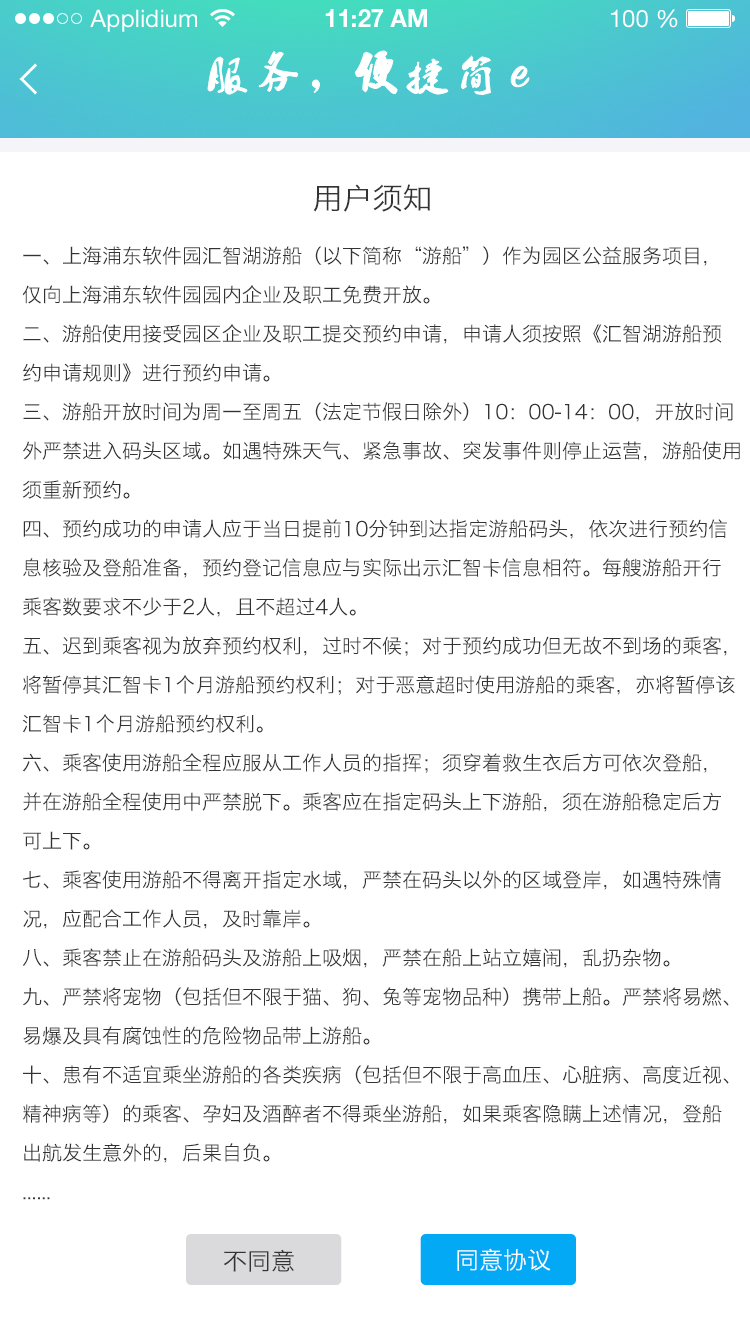
<style>
.page{position:relative;width:750px;height:1334px;background:#ffffff}
.page>*{position:absolute;margin:0}
.t1{font:24px "HelveticaNeueLTStd-Roman";color:#ffffff}
.t2{font:24px "HelveticaNeueLTStd-Bd";color:#ffffff}
.t3{font:30px "HiraginoSansGB-W3";color:#333333;text-transform:uppercase}
.t4{font:20px/39px "HiraginoSansGB-W3";color:#333333;text-transform:uppercase}
.t5{font:24px "HiraginoSansGB-W3";color:#333333;text-transform:uppercase}
.t6{font:24px "HiraginoSansGB-W3";color:#ffffff;text-transform:uppercase}
</style>
<div class="page">
<p class="t1" style="left:90px;top:9px;width:107px;height:23px">Applidium</p>
<p class="t2" style="left:325px;top:9px;width:102px;height:18px">11:27 AM</p>
<p class="t1" style="left:611px;top:9px;width:67px;height:19px">100 %</p>
<p class="t3" style="left:313px;top:184px;width:117px;height:28px">用户须知</p>
<p class="t4" style="left:22px;top:246px;width:718px;height:954px">一、上海浦东软件园汇智湖游船（以下简称“游船”）作为园区公益服务项目，<br>仅向上海浦东软件园园内企业及职工免费开放。<br>二、游船使用接受园区企业及职工提交预约申请，申请人须按照《汇智湖游船预<br>约申请规则》进行预约申请。<br>三、游船开放时间为周一至周五（法定节假日除外）10：00-14：00，开放时间<br>外严禁进入码头区域。如遇特殊天气、紧急事故、突发事件则停止运营，游船使用<br>须重新预约。<br>四、预约成功的申请人应于当日提前10分钟到达指定游船码头，依次进行预约信<br>息核验及登船准备，预约登记信息应与实际出示汇智卡信息相符。每艘游船开行<br>乘客数要求不少于2人，且不超过4人。<br>五、迟到乘客视为放弃预约权利，过时不候；对于预约成功但无故不到场的乘客，<br>将暂停其汇智卡1个月游船预约权利；对于恶意超时使用游船的乘客，亦将暂停该<br>汇智卡1个月游船预约权利。<br>六、乘客使用游船全程应服从工作人员的指挥；须穿着救生衣后方可依次登船，<br>并在游船全程使用中严禁脱下。乘客应在指定码头上下游船，须在游船稳定后方<br>可上下。<br>七、乘客使用游船不得离开指定水域，严禁在码头以外的区域登岸，如遇特殊情<br>况，应配合工作人员，及时靠岸。<br>八、乘客禁止在游船码头及游船上吸烟，严禁在船上站立嬉闹，乱扔杂物。<br>九、严禁将宠物（包括但不限于猫、狗、兔等宠物品种）携带上船。严禁将易燃、<br>易爆及具有腐蚀性的危险物品带上游船。<br>十、患有不适宜乘坐游船的各类疾病（包括但不限于高血压、心脏病、高度近视、<br>精神病等）的乘客、孕妇及酒醉者不得乘坐游船，如果乘客隐瞒上述情况，登船<br>出航发生意外的，后果自负。<br>......</p>
<p class="t5" style="left:223px;top:1249px;width:71px;height:23px">不同意</p>
<p class="t6" style="left:457px;top:1248px;width:94px;height:23px">同意协议</p>
</div>
